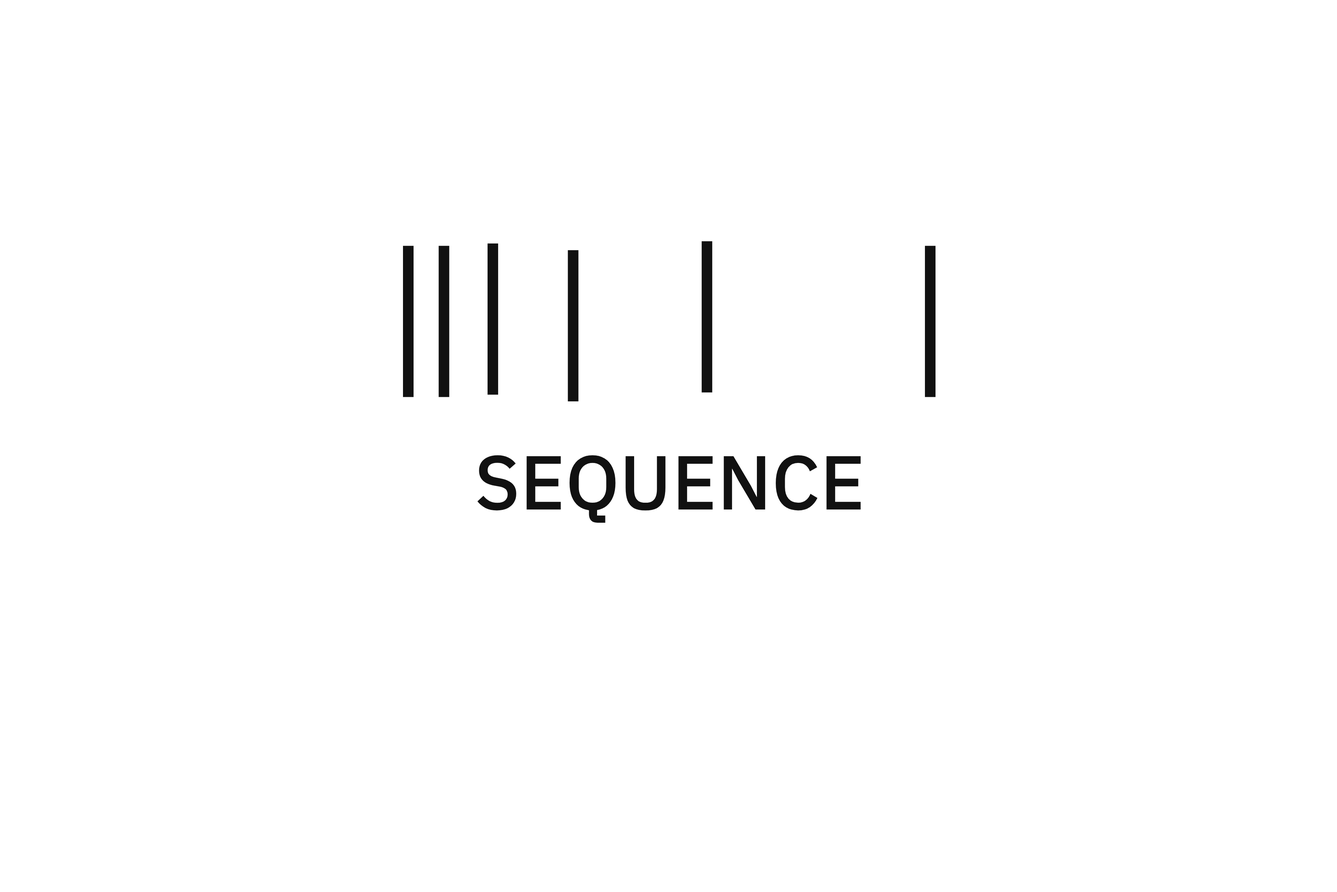
<style>
.page{position:relative;width:1337px;height:892px;background:#ffffff}
.page>*{position:absolute;margin:0}
.t1{font:76.4px "IBMPlexSans-Medium";color:#111111}
</style>
<div class="page">
<p class="t1" style="left:478px;top:455px;width:383px;height:67px">SEQUENCE</p>
</div>
